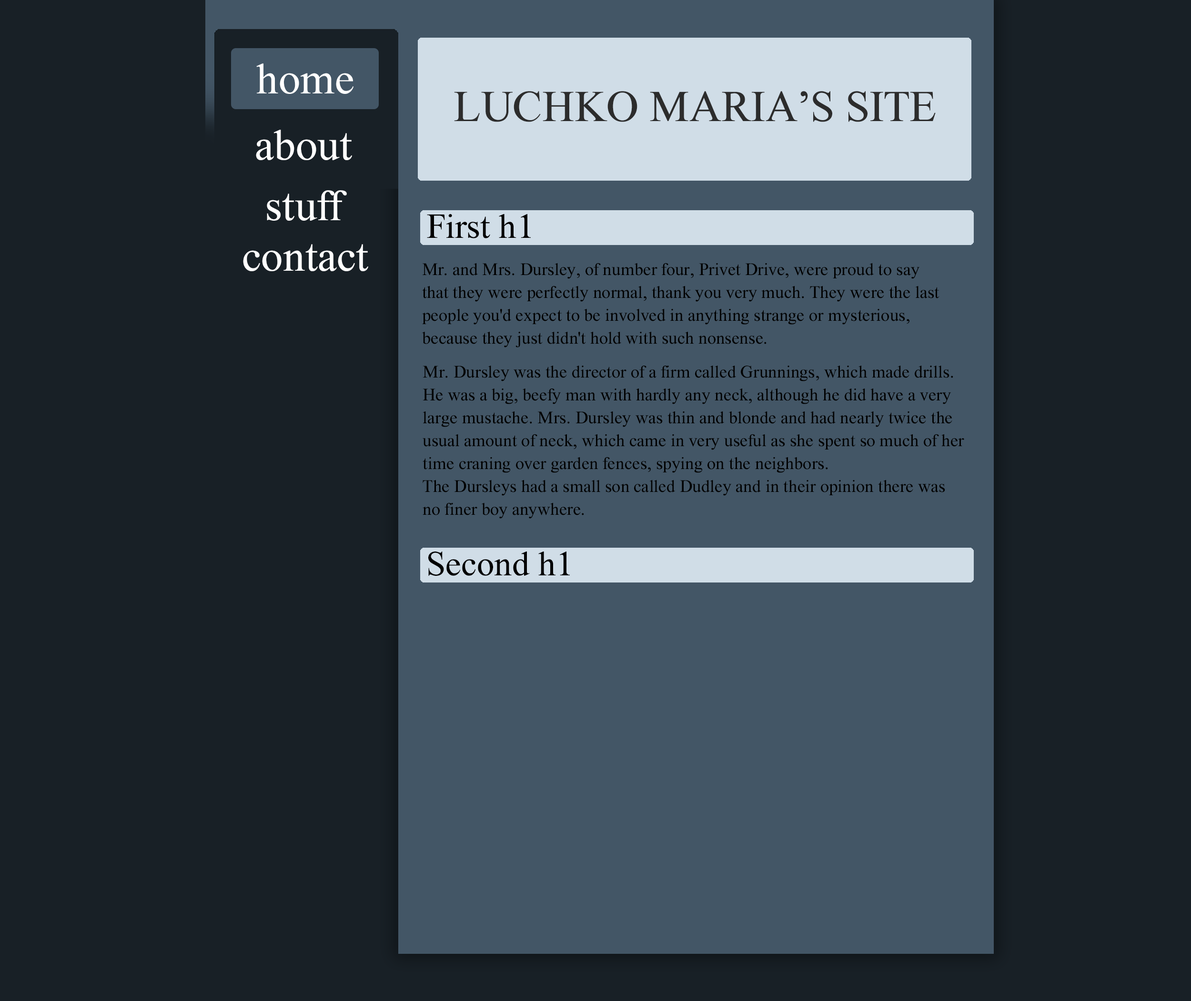
<style>
.page{position:relative;width:1191px;height:1001px;background:#182026}
.page>*{position:absolute;margin:0}
.t1{font:42.9px "Time-Roman";color:#ffffff}
.t2{font:42.9px "Time-Roman";color:#2c2c2c}
.t3{font:34.3px "Time-Roman";color:#000000}
.t4{font:17.2px/22.9px "Time-Roman";color:#000000}
</style>
<div class="page">
<p class="t1" style="left:256px;top:63px;width:98px;height:31px">home</p>
<p class="t2" style="left:454px;top:91px;width:482px;height:31px">LUCHKO MARIA’S SITE</p>
<p class="t1" style="left:256px;top:130px;width:96px;height:30px">about</p>
<p class="t1" style="left:267px;top:190px;width:80px;height:31px">stuff</p>
<p class="t3" style="left:427px;top:214px;width:104px;height:24px">First h1</p>
<p class="t1" style="left:243px;top:244px;width:125px;height:27px">contact</p>
<p class="t4" style="left:422px;top:263px;width:518px;height:84px">Mr. and Mrs. Dursley, of number four, Privet Drive, were proud to say <br>that they were perfectly normal, thank you very much. They were the last <br>people you'd expect to be involved in anything strange or mysterious, <br>because they just didn't hold with such nonsense.</p>
<p class="t4" style="left:423px;top:366px;width:542px;height:153px">Mr. Dursley was the director of a firm called Grunnings, which made drills. <br>He was a big, beefy man with hardly any neck, although he did have a very <br>large mustache. Mrs. Dursley was thin and blonde and had nearly twice the <br>usual amount of neck, which came in very useful as she spent so much of her <br>time craning over garden fences, spying on the neighbors. <br>The Dursleys had a small son called Dudley and in their opinion there was <br>no finer boy anywhere.</p>
<p class="t3" style="left:428px;top:551px;width:142px;height:25px">Second h1</p>
</div>
